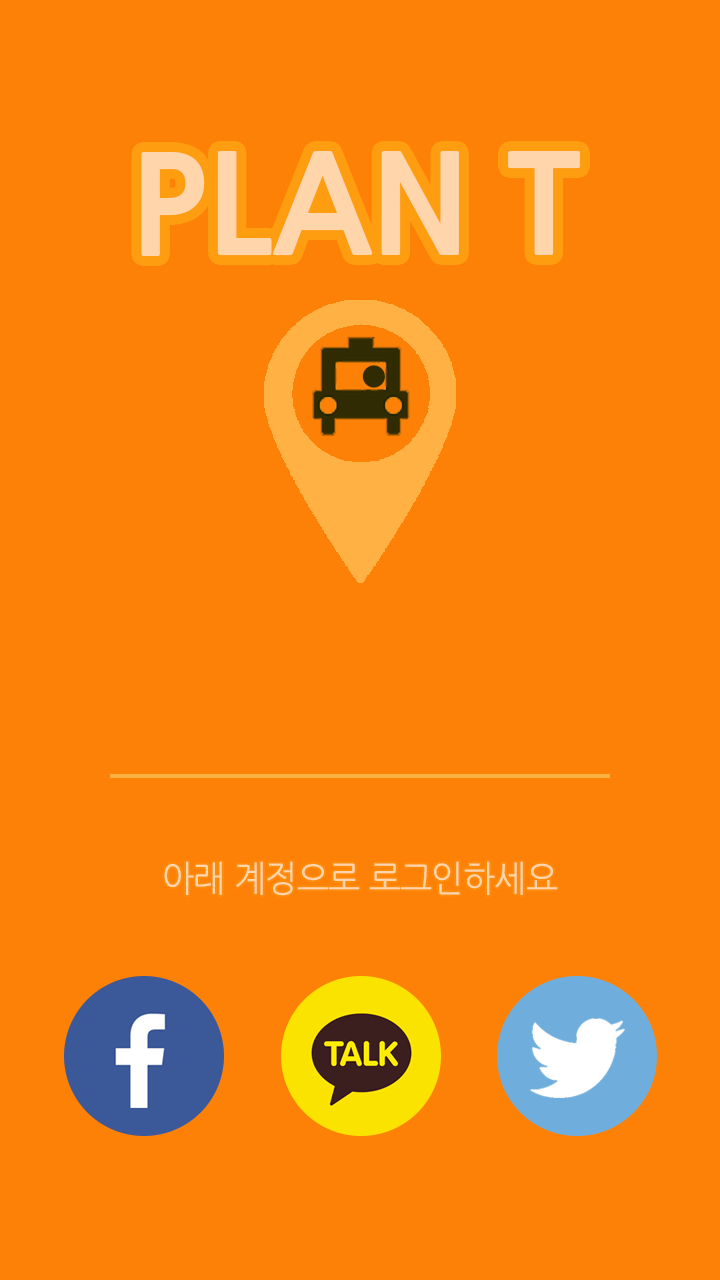
<style>
.page{position:relative;width:720px;height:1280px;background:#fd8107}
.page>*{position:absolute;margin:0}
.t1{font:135px "NanumGothicExtraBold";color:#ffd5ac}
.t2{font:36px "NanumGothic";letter-spacing:-0.02em;color:#ffd5ac;scale:0.95 1}
</style>
<div class="page">
<p class="t1" style="left:141px;top:151px;width:439px;height:105px">PLAN T</p>
<p class="t2" style="left:164px;top:861px;width:394px;height:35px">아래 계정으로 로그인하세요</p>
</div>
